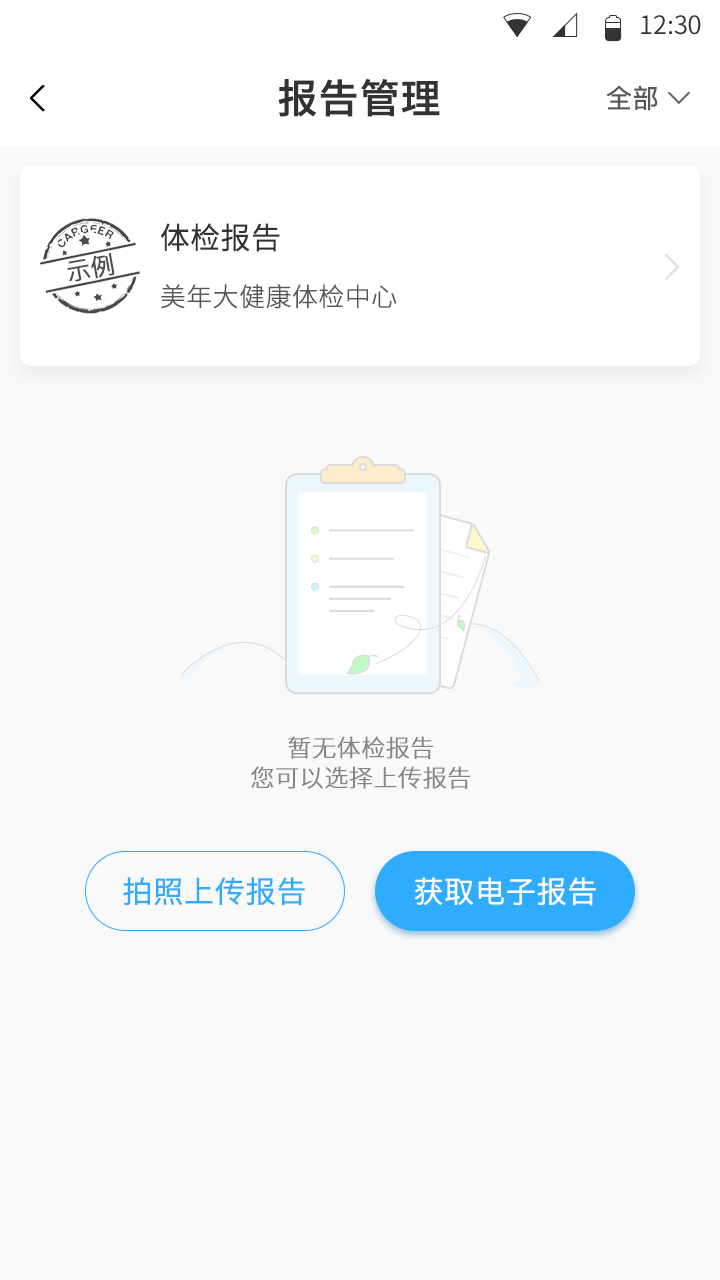
<style>
.page{position:relative;width:720px;height:1280px;background:#f9f9f9}
.page>*{position:absolute;margin:0}
.t1{font:25.4px "SourceHanSansCN-Normal";color:#333333}
.t2{font:40px "SourceHanSansCN-Medium";color:#333333;font-weight:bold}
.t3{font:26px "PingFangSC-Regular";color:#575757;font-weight:bold}
.t4{font:30px "SourceHanSansCN-Normal";color:#333333;font-weight:bold}
.t5{font:24px "PingFangSC-Light";color:#4c4c4c;font-weight:bold}
.t6{font:26px "SourceHanSansCN-Light";color:#575757;font-weight:bold}
.t7{font:24px/30px "SourceHanSansCN-Light";color:#858585;font-weight:bold}
.t8{font:30px "SourceHanSansCN-Normal";color:#30acff;font-weight:bold}
.t9{font:30px "SourceHanSansCN-Normal";color:#ffffff;font-weight:bold}
</style>
<div class="page">
<p class="t1" style="left:641px;top:15px;width:60px;height:20px">12:30</p>
<p class="t2" style="left:278px;top:79px;width:162px;height:38px">报告管理</p>
<p class="t3" style="left:606px;top:85px;width:52px;height:26px">全部</p>
<p class="t4" style="left:160px;top:223px;width:120px;height:29px">体检报告</p>
<p class="t5" style="left:67px;top:253px;width:48px;height:29px;rotate:-10deg">示例</p>
<p class="t6" style="left:161px;top:284px;width:236px;height:25px">美年大健康体检中心</p>
<p class="t7" style="left:251px;top:736px;width:220px;height:53px;text-align:center">暂无体检报告<br>您可以选择上传报告</p>
<p class="t8" style="left:123px;top:877px;width:182px;height:29px">拍照上传报告</p>
<p class="t9" style="left:414px;top:877px;width:182px;height:29px">获取电子报告</p>
</div>
